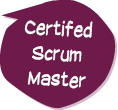
<style>
.page{position:relative;width:118px;height:110px;background:#6e1b4b}
.page>*{position:absolute;margin:0}
.t1{font:21px "SuplexmentaryComicNC";color:#ffffff;scale:0.8 1}
</style>
<div class="page">
<p class="t1" style="left:24px;top:20px;width:69px;height:69px;text-align:center;rotate:4deg">Certifed <br>Scrum <br>Master</p>
</div>
